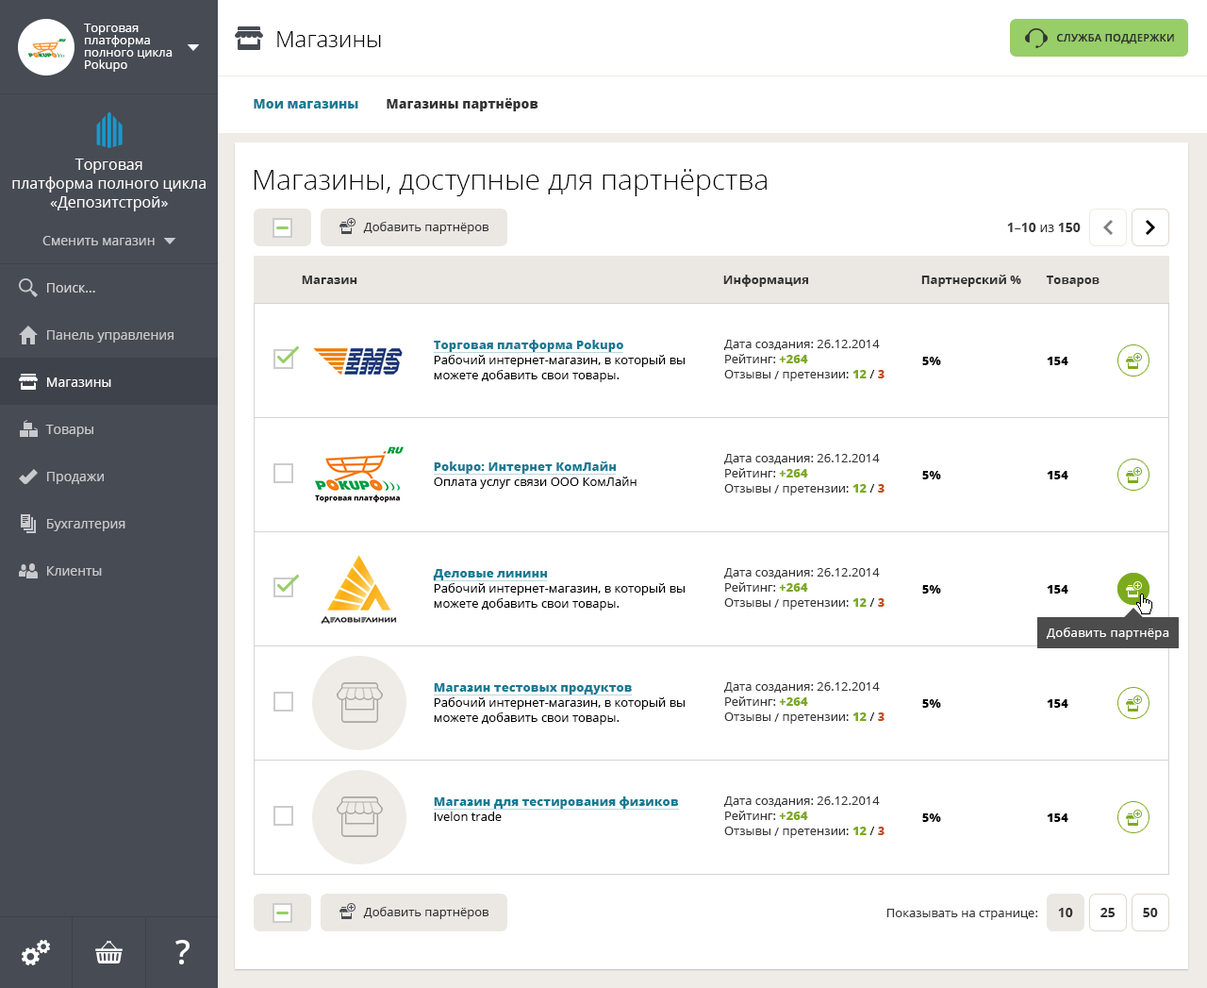
<style>
.page{position:relative;width:1207px;height:988px;background:#ffffff}
.page>*{position:absolute;margin:0}
.t1{font:12.3px/12.3px "OpenSans";color:#ffffff}
.t2{font:22.6px "OpenSans-Light";color:#010101}
.t3{font:10.4px "OpenSans-Semibold";letter-spacing:0.025em;color:#333333;text-transform:uppercase}
.t4{font:13.2px "OpenSans-Extrabold";color:#177a93}
.t5{font:13.2px "OpenSans-Extrabold";color:#333333}
.t6{font:15.1px/18.9px "OpenSans";color:#ffffff}
.t7{font:28.3px "OpenSans-Light";color:#000000}
.t8{font:12.3px "OpenSans";color:#333333}
.t9{font:13.2px "OpenSans-Bold";color:#333333}
.t10{font:13.2px "OpenSans";color:#333333}
.t11{font:13.2px "OpenSans";color:#c8c9cc}
.t12{font:12.3px "OpenSans-Bold";color:#333333}
.t13{font:13.2px "OpenSans";color:#d3d4d5}
.t14{font:12.3px/15.1px "OpenSans";color:#000000}
.t15{font:12.3px/15.1px "OpenSans-Extrabold";color:#177a93}
.t16{font:12.3px/15.1px "OpenSans";color:#333333}
.t17{font:12.3px/15.1px "OpenSans-Extrabold";color:#7caa1f}
.t18{font:12.3px/15.1px "OpenSans-Extrabold";color:#c64c1b}
.t19{font:12.3px "OpenSans-Extrabold";color:#000000}
.t20{font:13.2px "OpenSans";color:#ffffff}
.t21{font:12.3px "OpenSans";letter-spacing:0.025em;color:#ffffff}
</style>
<div class="page">
<p class="t1" style="left:84px;top:24px;width:89px;height:48px">Торговая <br>платформа <br>полного цикла <br>Pokupo</p>
<p class="t2" style="left:277px;top:31px;width:104px;height:16px">Магазины</p>
<p class="t3" style="left:1057px;top:33px;width:117px;height:11px">Служба поддержки</p>
<p class="t4" style="left:254px;top:99px;width:104px;height:9px">Мои магазины</p>
<p class="t5" style="left:387px;top:98px;width:152px;height:13px">Магазины партнёров</p>
<p class="t6" style="left:12px;top:158px;width:194px;height:53px;text-align:center">Торговая<br>платформа полного цикла<br>«Депозитстрой»</p>
<p class="t7" style="left:254px;top:169px;width:513px;height:27px">Магазины, доступные для партнёрства</p>
<p class="t8" style="left:363px;top:222px;width:127px;height:12px">Добавить партнёров</p>
<p class="t9" style="left:1007px;top:223px;width:74px;height:9px">1<span class="t10">–</span>10<span class="t10"> из </span>150</p>
<p class="t11" style="left:42px;top:236px;width:113px;height:9px">Сменить магазин</p>
<p class="t12" style="left:302px;top:275px;width:56px;height:9px">Магазин</p>
<p class="t12" style="left:723px;top:274px;width:86px;height:13px">Информация</p>
<p class="t12" style="left:922px;top:274px;width:100px;height:13px">Партнерский %</p>
<p class="t12" style="left:1046px;top:275px;width:54px;height:12px">Товаров</p>
<p class="t13" style="left:47px;top:283px;width:48px;height:9px">Поиск...</p>
<p class="t11" style="left:47px;top:330px;width:127px;height:12px">Панель управления</p>
<p class="t14" style="left:434px;top:340px;width:251px;height:42px"><span class="t15">Торговая платформа Pokupo<br></span>Рабочий интернет-магазин, в который вы<br>можете добавить свои товары.</p>
<p class="t16" style="left:724px;top:340px;width:161px;height:41px">Дата создания: 26.12.2014<br>Рейтинг: <span class="t17">+264<br></span>Отзывы / претензии: <span class="t17">12</span><span class="t14"> / </span><span class="t18">3</span></p>
<p class="t19" style="left:923px;top:357px;width:18px;height:8px">5%</p>
<p class="t19" style="left:1047px;top:357px;width:22px;height:8px">154</p>
<p class="t20" style="left:47px;top:377px;width:64px;height:10px">Магазины</p>
<p class="t11" style="left:45px;top:424px;width:48px;height:13px">Товары</p>
<p class="t14" style="left:434px;top:461px;width:203px;height:28px"><span class="t15">Pokupo: Интернет КомЛайн<br></span>Оплата услуг связи ООО КомЛайн</p>
<p class="t16" style="left:724px;top:454px;width:161px;height:41px">Дата создания: 26.12.2014<br>Рейтинг: <span class="t17">+264<br></span>Отзывы / претензии: <span class="t17">12</span><span class="t14"> / </span><span class="t18">3</span></p>
<p class="t11" style="left:47px;top:472px;width:57px;height:12px">Продажи</p>
<p class="t19" style="left:923px;top:471px;width:18px;height:8px">5%</p>
<p class="t19" style="left:1047px;top:471px;width:22px;height:8px">154</p>
<p class="t11" style="left:47px;top:519px;width:78px;height:12px">Бухгалтерия</p>
<p class="t11" style="left:47px;top:566px;width:55px;height:9px">Клиенты</p>
<p class="t14" style="left:433px;top:569px;width:252px;height:41px"><span class="t15">Деловые лининн<br></span>Рабочий интернет-магазин, в который вы<br>можете добавить свои товары.</p>
<p class="t16" style="left:724px;top:568px;width:161px;height:41px">Дата создания: 26.12.2014<br>Рейтинг: <span class="t17">+264<br></span>Отзывы / претензии: <span class="t17">12</span><span class="t14"> / </span><span class="t18">3</span></p>
<p class="t19" style="left:923px;top:585px;width:18px;height:8px">5%</p>
<p class="t19" style="left:1047px;top:585px;width:22px;height:8px">154</p>
<p class="t21" style="left:1047px;top:627px;width:123px;height:13px">Добавить партнёра</p>
<p class="t14" style="left:434px;top:683px;width:251px;height:41px"><span class="t15">Магазин тестовых продуктов<br></span>Рабочий интернет-магазин, в который вы<br>можете добавить свои товары.</p>
<p class="t16" style="left:724px;top:682px;width:161px;height:41px">Дата создания: 26.12.2014<br>Рейтинг: <span class="t17">+264<br></span>Отзывы / претензии: <span class="t17">12</span><span class="t14"> / </span><span class="t18">3</span></p>
<p class="t19" style="left:923px;top:699px;width:18px;height:8px">5%</p>
<p class="t19" style="left:1047px;top:699px;width:22px;height:8px">154</p>
<p class="t15" style="left:434px;top:796px;width:245px;height:25px">Магазин для тестирования физиков<br><span class="t14">Ivelon trade</span></p>
<p class="t16" style="left:724px;top:796px;width:161px;height:42px">Дата создания: 26.12.2014<br>Рейтинг: <span class="t17">+264<br></span>Отзывы / претензии: <span class="t17">12</span><span class="t14"> / </span><span class="t18">3</span></p>
<p class="t19" style="left:923px;top:813px;width:18px;height:9px">5%</p>
<p class="t19" style="left:1047px;top:813px;width:22px;height:9px">154</p>
<p class="t8" style="left:363px;top:906px;width:127px;height:13px">Добавить партнёров</p>
<p class="t8" style="left:887px;top:908px;width:152px;height:12px">Показывать на странице:</p>
<p class="t9" style="left:1058px;top:907px;width:15px;height:10px">10</p>
<p class="t9" style="left:1101px;top:907px;width:15px;height:10px">25</p>
<p class="t9" style="left:1143px;top:907px;width:15px;height:10px">50</p>
</div>
